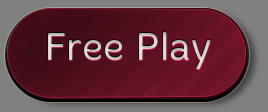
<style>
.page{position:relative;width:268px;height:112px}
.page>*{position:absolute;margin:0}
.t1{font:40px "Merge-Light";color:#d3d2d3}
</style>
<div class="page">
<p class="t1" style="left:48px;top:32px;width:163px;height:37px">Free Play</p>
</div>
